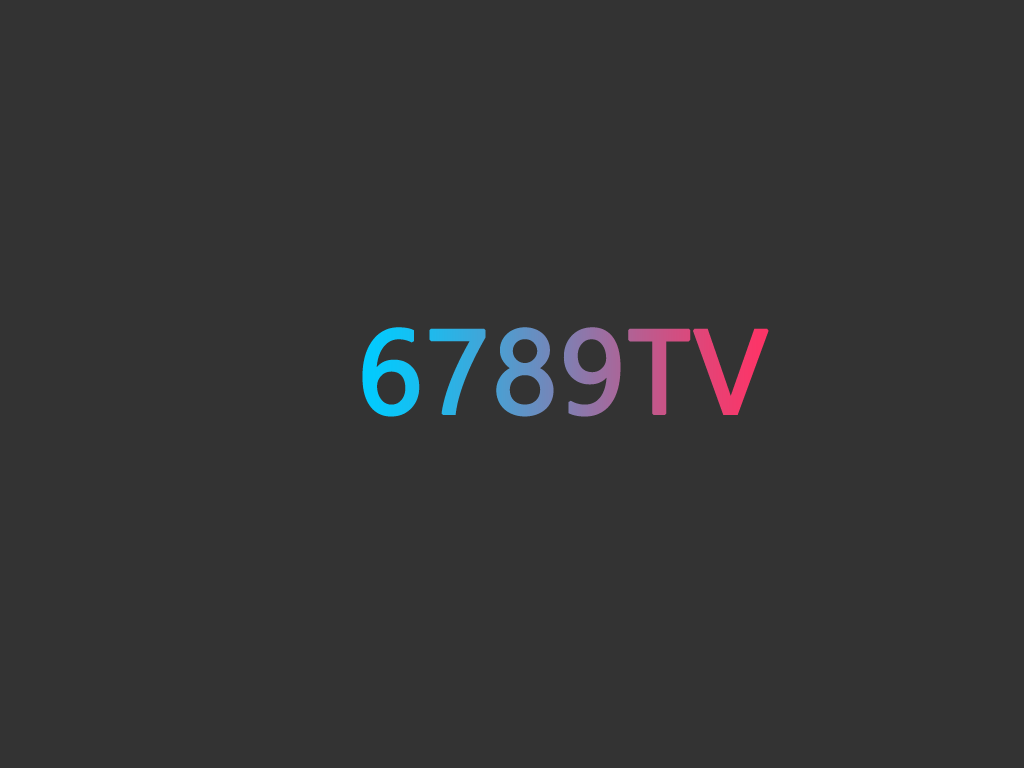
<style>
.page{position:relative;width:1024px;height:768px;background:#333333}
.page>*{position:absolute;margin:0}
.t1{font:110px "MicrosoftYaHei";font-weight:bold}
</style>
<div class="page">
<p class="t1" style="left:362px;top:327px;width:407px;height:90px">6789TV</p>
</div>
